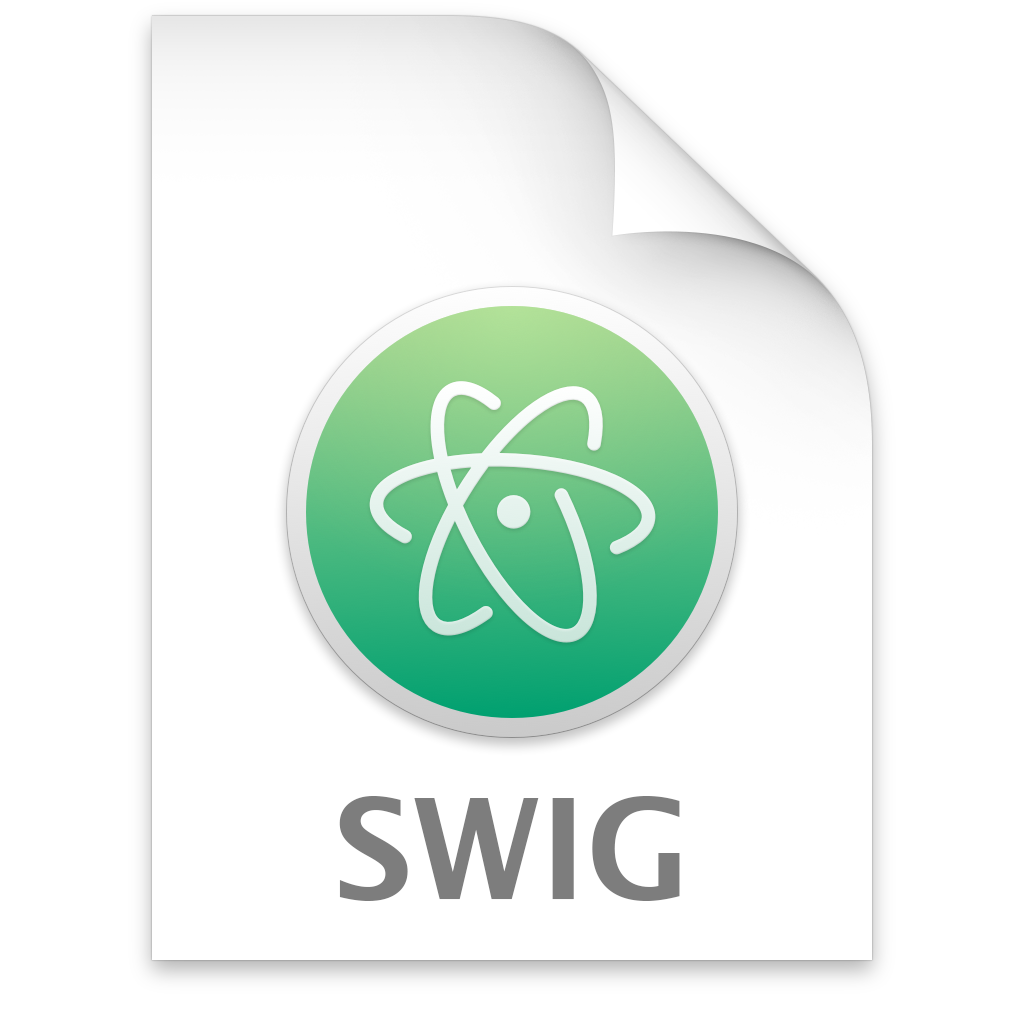
<style>
.page{position:relative;width:1024px;height:1024px;background:#ffffff}
.page>*{position:absolute;margin:0}
.t1{font:140px "LucidaGrande-Bold";color:#7d7d7d}
</style>
<div class="page">
<p class="t1" style="left:339px;top:796px;width:341px;height:105px">SWIG</p>
</div>
